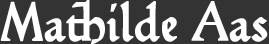
<style>
.page{position:relative;width:269px;height:44px;background:#333333}
.page>*{position:absolute;margin:0}
.t1{font:54.2px "Hamlet-Tertia18";color:#ffffff;font-weight:bold}
</style>
<div class="page">
<p class="t1" style="left:0px;top:0px;width:268px;height:45px">Mathilde Aas</p>
</div>
